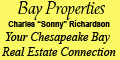
<style>
.page{position:relative;width:120px;height:60px;background:#fbf963}
.page>*{position:absolute;margin:0}
.t1{font:18px "HavixHmk";color:#000000}
.t2{font:12px "TimesNewRomanPS-ItalicMT";color:#000000}
.t3{font:9px "ArialNarrow-Bold";color:#000000}
</style>
<div class="page">
<p class="t1" style="left:18px;top:1px;width:87px;height:19px">Bay Properties</p>
<p class="t2" style="left:2px;top:20px;width:114px;height:36px;text-align:center"><span class="t3">Charles “Sonny” Richardson<br></span>Your Chesapeake Bay <br>Real Estate Connection</p>
</div>
